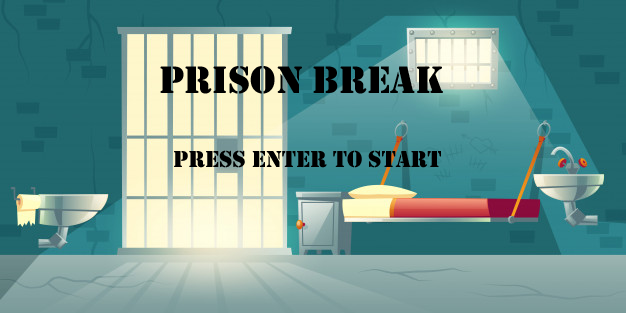
<style>
.page{position:relative;width:626px;height:313px}
.page>*{position:absolute;margin:0}
.t1{font:39.9px "Stencil";color:#000000}
.t2{font:23.9px "Stencil";color:#000000}
</style>
<div class="page">
<p class="t1" style="left:160px;top:66px;width:283px;height:28px">Prison BREAK</p>
<p class="t2" style="left:174px;top:150px;width:267px;height:18px">Press enter to start</p>
</div>
